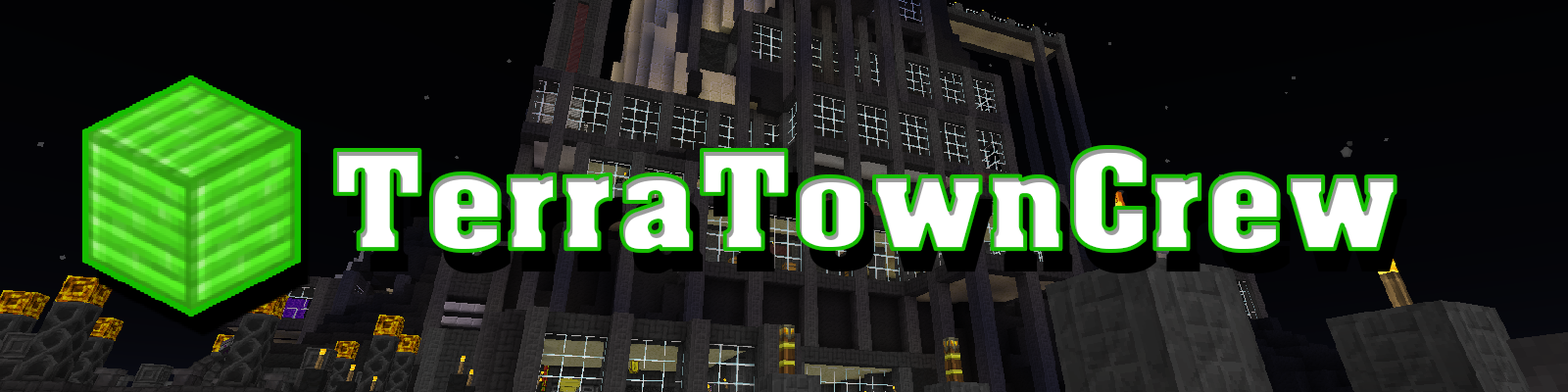
<style>
.page{position:relative;width:1568px;height:392px}
.page>*{position:absolute;margin:0}
.t1{font:130.7px "AcmeFont";letter-spacing:0.01em;color:#ffffff}
</style>
<div class="page">
<p class="t1" style="left:335px;top:147px;width:1061px;height:104px">TerraTownCrew</p>
</div>
